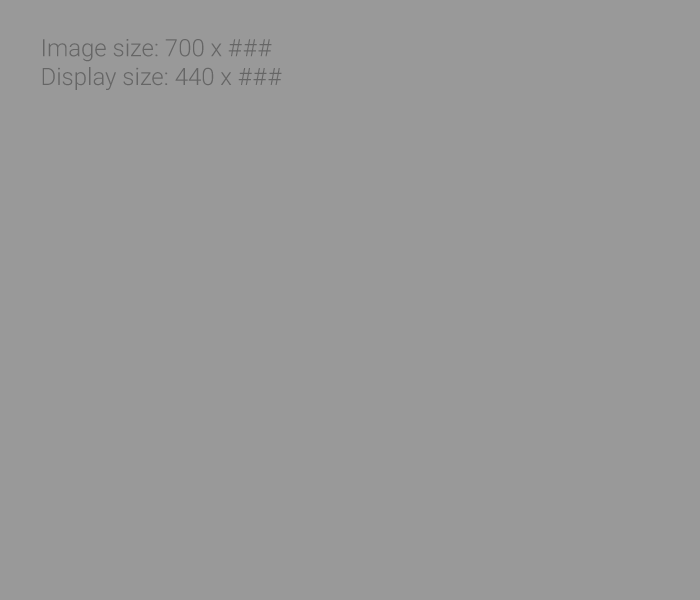
<style>
.page{position:relative;width:700px;height:600px;background:#999999}
.page>*{position:absolute;margin:0}
.t1{font:24px "Roboto-Light";color:#666666}
</style>
<div class="page">
<p class="t1" style="left:42px;top:39px;width:240px;height:51px">Image size: 700 x ###<br>Display size: 440 x ###</p>
</div>
